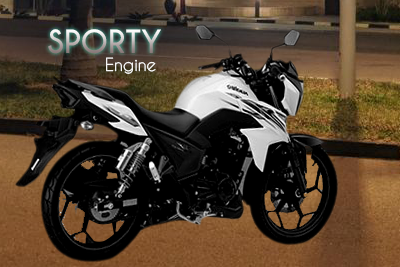
<style>
.page{position:relative;width:400px;height:267px}
.page>*{position:absolute;margin:0}
.t1{font:30px "CaviarDreams-Bold"}
.t2{font:17px "CaviarDreams";color:#ffffff}
</style>
<div class="page">
<p class="t1" style="left:48px;top:29px;width:113px;height:25px">SPORTY</p>
<p class="t2" style="left:106px;top:57px;width:50px;height:17px">Engine</p>
</div>
